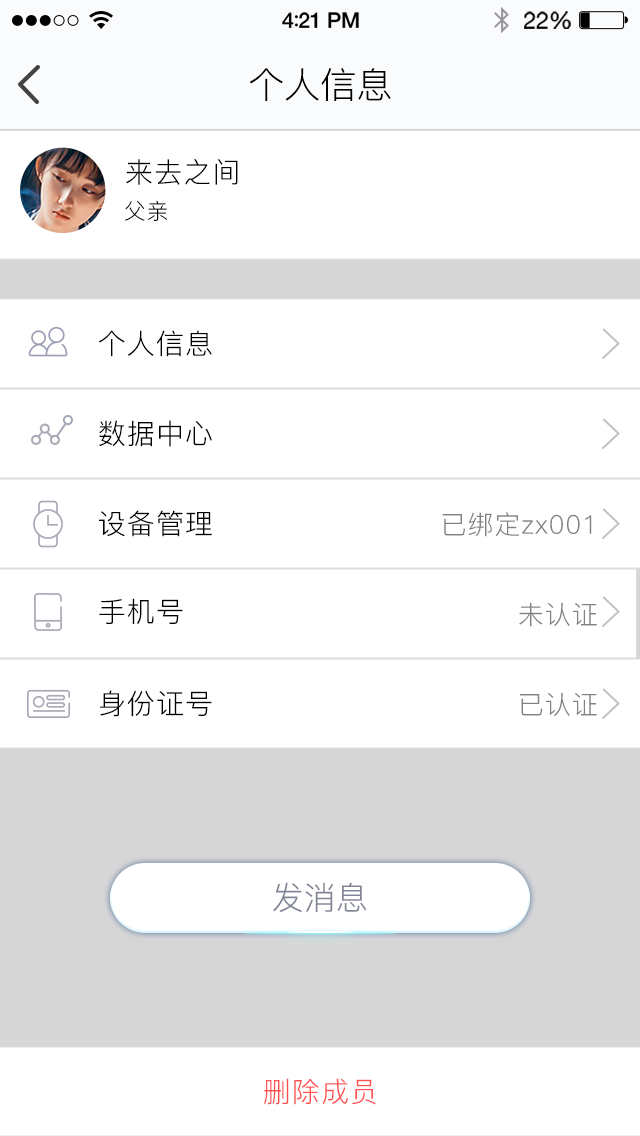
<style>
.page{position:relative;width:640px;height:1136px;background:#ffffff}
.page>*{position:absolute;margin:0}
.t1{font:36px "PingFang-SC-Regular";color:#000000}
.t2{font:28px "PingFang-SC-Regular";letter-spacing:0.04em;color:#000000}
.t3{font:22px "PingFang-SC-Regular";letter-spacing:0.04em;color:#010101}
.t4{font:26px "PingFang-SC-Regular";letter-spacing:0.04em;color:#808282}
.t5{font:32px "PingFang-SC-Regular";color:#7f8393}
.t6{font:28px "PingFang-SC-Regular";letter-spacing:0.04em;color:#ff5050}
</style>
<div class="page">
<p class="t1" style="left:249px;top:68px;width:142px;height:33px">个人信息</p>
<p class="t2" style="left:126px;top:159px;width:112px;height:26px">来去之间</p>
<p class="t3" style="left:125px;top:200px;width:43px;height:21px">父亲</p>
<p class="t2" style="left:99px;top:330px;width:113px;height:27px">个人信息</p>
<p class="t2" style="left:99px;top:420px;width:113px;height:27px">数据中心</p>
<p class="t2" style="left:99px;top:510px;width:113px;height:27px">设备管理</p>
<p class="t4" style="left:442px;top:512px;width:150px;height:25px">已绑定zx001</p>
<p class="t2" style="left:99px;top:598px;width:84px;height:27px">手机号</p>
<p class="t4" style="left:519px;top:602px;width:78px;height:25px">未认证</p>
<p class="t2" style="left:100px;top:690px;width:112px;height:27px">身份证号</p>
<p class="t4" style="left:520px;top:692px;width:77px;height:24px">已认证</p>
<p class="t5" style="left:273px;top:882px;width:94px;height:30px">发消息</p>
<p class="t6" style="left:264px;top:1078px;width:112px;height:27px">删除成员</p>
</div>
